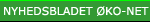
<style>
.page{position:relative;width:150px;height:22px;background:#339933}
.page>*{position:absolute;margin:0}
.t1{font:11px "Verdana";color:#ffffff}
</style>
<div class="page">
<p class="t1" style="left:4px;top:6px;width:145px;height:10px">NYHEDSBLADET ØKO-NET</p>
</div>
